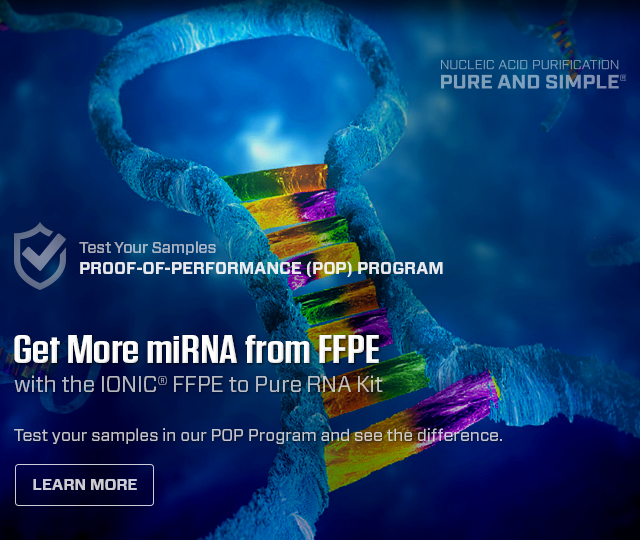
<style>
.page{position:relative;width:640px;height:540px}
.page>*{position:absolute;margin:0}
.t1{font:16px "Forza-Medium";letter-spacing:-0.01em;color:#a8b3c3}
.t2{font:17px "Forza-Bold";letter-spacing:-0.01em;color:#e6e9ed;text-transform:uppercase}
.t3{font:39px "Tungsten-Semibold";color:#fefefe;scale:1.31 1}
.t4{font:22.4px "Forza-Book";letter-spacing:-0.007em;color:#b8bbc3}
.t5{font:22.4px "Forza-Book";letter-spacing:-0.007em;color:#b8bbc3;text-transform:uppercase}
.t6{font:17px "Forza-Book";color:#c2c4ce}
.t7{font:16px "Forza-Bold";letter-spacing:-0.01em;color:#ccccd5;text-transform:uppercase}
</style>
<div class="page">
<p class="t1" style="left:79px;top:241px;width:137px;height:14px">Test Your Samples</p>
<p class="t2" style="left:80px;top:261px;width:363px;height:16px">Proof-of-Performance (POP) Program</p>
<p class="t3" style="left:14px;top:335px;width:365px;height:28px">Get More miRNA from FFPE</p>
<p class="t4" style="left:14px;top:375px;width:369px;height:17px">with the <span class="t5">Ionic®</span> FFPE to Pure RNA Kit</p>
<p class="t6" style="left:14px;top:428px;width:488px;height:16px">Test your samples in our POP Program and see the difference.</p>
<p class="t7" style="left:33px;top:479px;width:104px;height:11px">Learn More</p>
</div>
